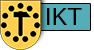
<style>
.page{position:relative;width:94px;height:50px;background:#ffffff}
.page>*{position:absolute;margin:0}
.t1{font:24.5px "MyriadPro-Regular";color:#000000;scale:1.16 1}
</style>
<div class="page">
<p class="t1" style="left:47px;top:8px;width:35px;height:17px">IKT</p>
</div>
